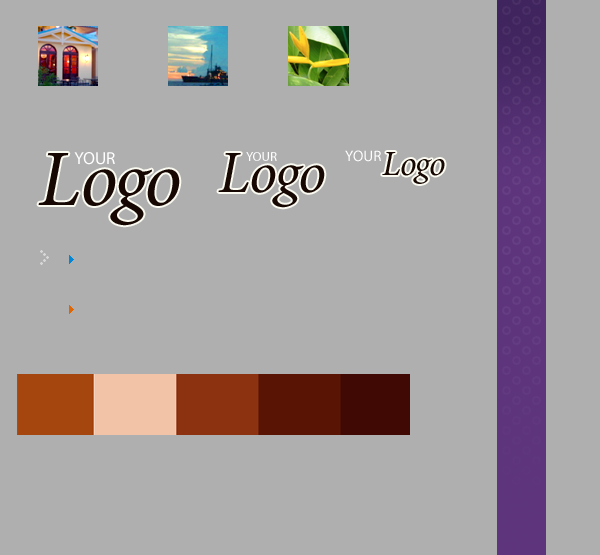
<style>
.page{position:relative;width:600px;height:555px;background:#afafaf}
.page>*{position:absolute;margin:0}
.t1{font:15.3px "MyriadPro-Regular";color:#ffffff;text-transform:uppercase}
.t2{font:80px "MinionPro-It";letter-spacing:-0.04em;color:#160702}
.t3{font:80px "MinionPro-It";letter-spacing:-0.02em;color:#160702;text-transform:uppercase}
.t4{font:80px "MinionPro-It";color:#160702}
.t5{font:17.3px "MyriadPro-Regular";color:#ffffff;text-transform:uppercase}
.t6{font:60px "MinionPro-It";letter-spacing:-0.04em;color:#160702}
.t7{font:60px "MinionPro-It";letter-spacing:-0.02em;color:#160702;text-transform:uppercase}
.t8{font:60px "MinionPro-It";color:#160702}
.t9{font:13px "MyriadPro-Regular";color:#ffffff;text-transform:uppercase}
.t10{font:35.4px "MinionPro-It";letter-spacing:-0.04em;color:#160702}
.t11{font:35.4px "MinionPro-It";letter-spacing:-0.02em;color:#160702;text-transform:uppercase}
.t12{font:35.4px "MinionPro-It";color:#160702}
</style>
<div class="page">
<p class="t1" style="left:345px;top:150px;width:36px;height:12px">YOUR</p>
<p class="t2" style="left:38px;top:153px;width:142px;height:73px"><span class="t3">L</span>og<span class="t4">o</span></p>
<p class="t5" style="left:74px;top:152px;width:41px;height:13px">YOUR</p>
<p class="t6" style="left:218px;top:153px;width:107px;height:55px"><span class="t7">L</span>og<span class="t8">o</span></p>
<p class="t9" style="left:246px;top:152px;width:31px;height:9px">YOUR</p>
<p class="t10" style="left:382px;top:152px;width:63px;height:32px"><span class="t11">L</span>og<span class="t12">o</span></p>
</div>
